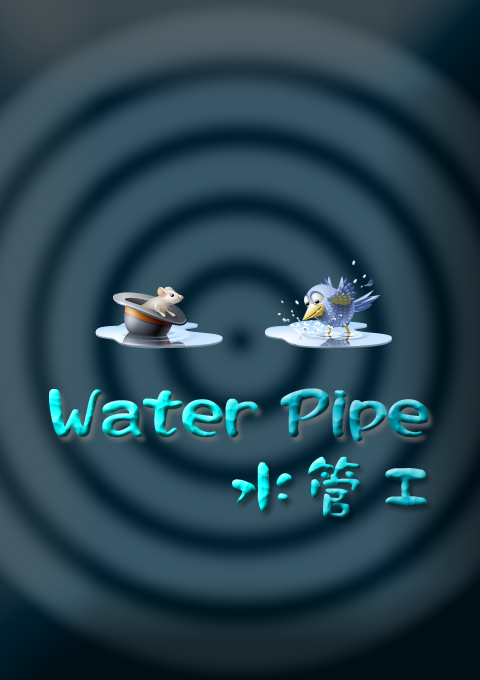
<style>
.page{position:relative;width:480px;height:680px}
.page>*{position:absolute;margin:0}
.t1{font:60px "DFLiuLi-Bd-HKP-BF";font-weight:bold}
.t2{font:72px "DFMo-Xb-HKP-BF"}
</style>
<div class="page">
<p class="t1" style="left:49px;top:388px;width:380px;height:54px">Water Pipe</p>
<p class="t2" style="left:232px;top:456px;width:195px;height:62px">水管工</p>
</div>
